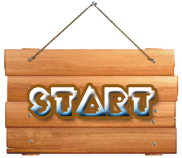
<style>
.page{position:relative;width:182px;height:158px;background:#ffffff}
.page>*{position:absolute;margin:0}
.t1{font:33.3px "CrackMan";font-weight:bold}
</style>
<div class="page">
<p class="t1" style="left:29px;top:85px;width:126px;height:32px">Start</p>
</div>
